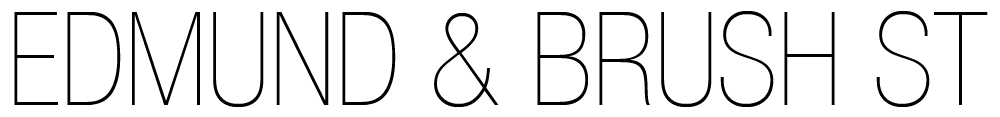
<style>
.page{position:relative;width:1000px;height:117px;background:#ffffff}
.page>*{position:absolute;margin:0}
.t1{font:130px "HelveticaNeueLTCom-UltLtCn";color:#000000}
</style>
<div class="page">
<p class="t1" style="left:14px;top:11px;width:974px;height:96px">EDMUND &amp; BRUSH ST</p>
</div>
